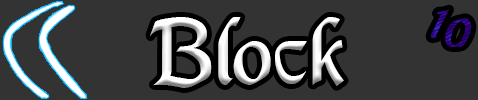
<style>
.page{position:relative;width:478px;height:100px;background:#333333}
.page>*{position:absolute;margin:0}
.t1{font:100px "DS_Mysticora";color:#ffffff}
.t2{font:50px "DS_Mysticora"}
</style>
<div class="page">
<p class="t1" style="left:150px;top:17px;width:194px;height:71px">Block</p>
<p class="t2" style="left:430px;top:9px;width:42px;height:38px;rotate:27deg">10</p>
</div>
